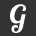
<style>
.page{position:relative;width:36px;height:36px;background:#333333}
.page>*{position:absolute;margin:0}
.t1{font:30px "Lobster1.4";color:#ffffff}
</style>
<div class="page">
<p class="t1" style="left:10px;top:4px;width:16px;height:29px">G</p>
</div>
